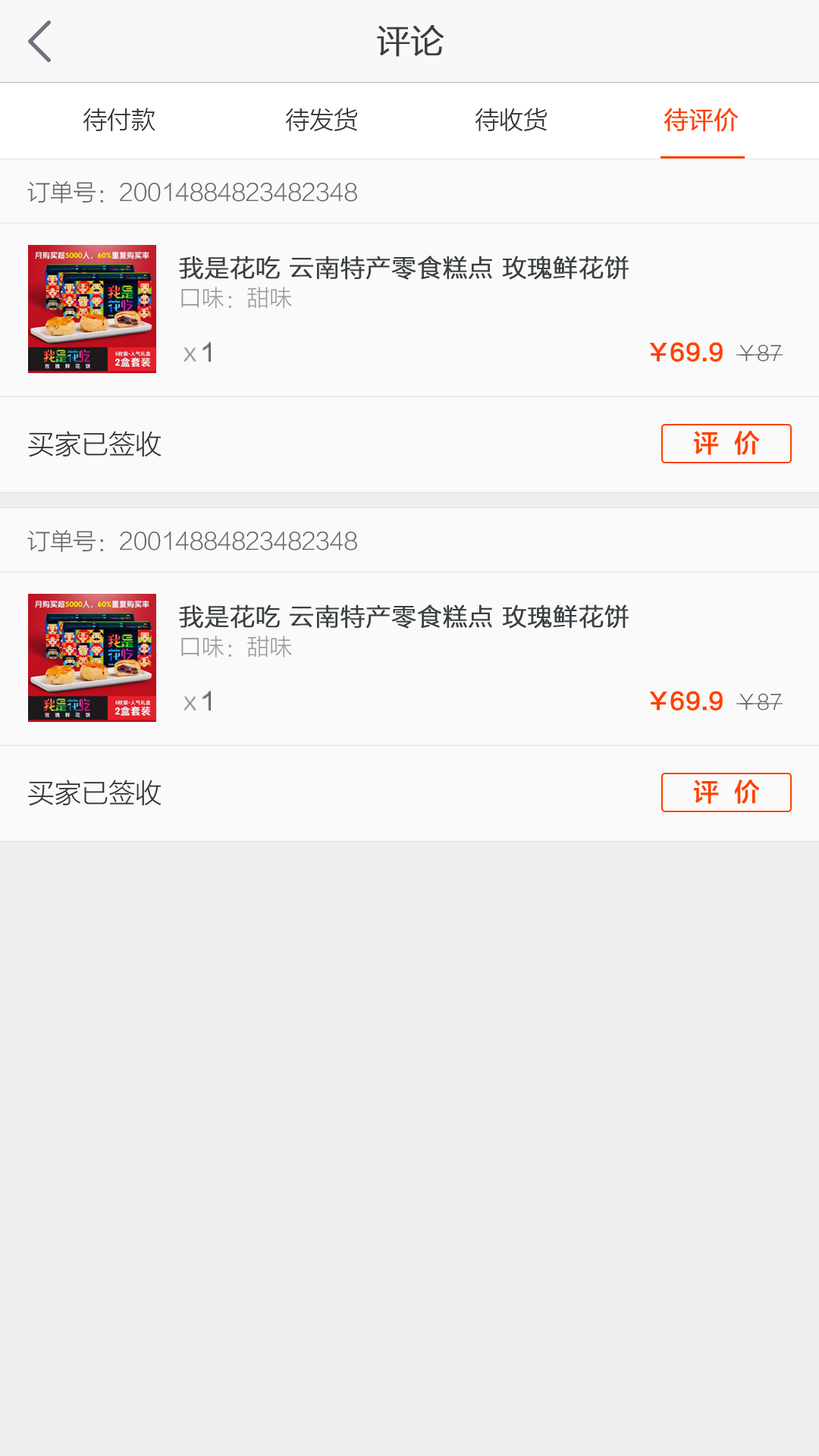
<style>
.page{position:relative;width:819px;height:1456px;background:#eeeeee}
.page>*{position:absolute;margin:0}
.t1{font:33.4px "FZLTXHK--GBK1-0";color:#3a3f42;font-weight:bold}
.t2{font:24.3px "FZLTXHK--GBK1-0";color:#333333}
.t3{font:24.3px "FZLTXHK--GBK1-0";color:#ff4100;font-weight:bold}
.t4{font:23px "FZLTXHK--GBK1-0";color:#666666}
.t5{font:24.3px/30.7px "FZLTXHK--GBK1-0";color:#3a3f42;font-weight:bold}
.t6{font:22.7px/30.7px "FZLTXHK--GBK1-0";color:#999999}
.t7{font:23px "FZLTZHK--GBK1-0";color:#666666}
.t8{font:23px "FZLTZHK--GBK1-0";color:#ff4100}
.t9{font:20.5px "FZLTXHK--GBK1-0";color:#666666}
.t10{font:26.9px "FZLTXHK--GBK1-0";color:#333333}
.t11{font:25.8px "FZLTZHK--GBK1-0";color:#ff4100}
</style>
<div class="page">
<p class="t1" style="left:377px;top:25px;width:67px;height:32px">评论</p>
<p class="t2" style="left:83px;top:108px;width:656px;height:24px">待付款                   待发货                 待收货                 <span class="t3">待评价</span></p>
<p class="t4" style="left:27px;top:181px;width:330px;height:22px">订单号：20014884823482348</p>
<p class="t5" style="left:179px;top:256px;width:450px;height:53px">我是花吃 云南特产零食糕点 玫瑰鲜花饼<br><span class="t6">口味：甜味</span></p>
<p class="t4" style="left:183px;top:342px;width:28px;height:20px">x <span class="t7">1</span></p>
<p class="t8" style="left:649px;top:342px;width:134px;height:20px">￥69.9  <span class="t9">￥87</span></p>
<p class="t10" style="left:28px;top:431px;width:134px;height:26px">买家已签收</p>
<p class="t11" style="left:694px;top:431px;width:66px;height:24px">评  价</p>
<p class="t4" style="left:27px;top:530px;width:330px;height:22px">订单号：20014884823482348</p>
<p class="t5" style="left:179px;top:604px;width:450px;height:53px">我是花吃 云南特产零食糕点 玫瑰鲜花饼<br><span class="t6">口味：甜味</span></p>
<p class="t4" style="left:183px;top:691px;width:28px;height:20px">x <span class="t7">1</span></p>
<p class="t8" style="left:649px;top:691px;width:134px;height:20px">￥69.9  <span class="t9">￥87</span></p>
<p class="t10" style="left:28px;top:780px;width:134px;height:26px">买家已签收</p>
<p class="t11" style="left:694px;top:780px;width:66px;height:24px">评  价</p>
</div>
